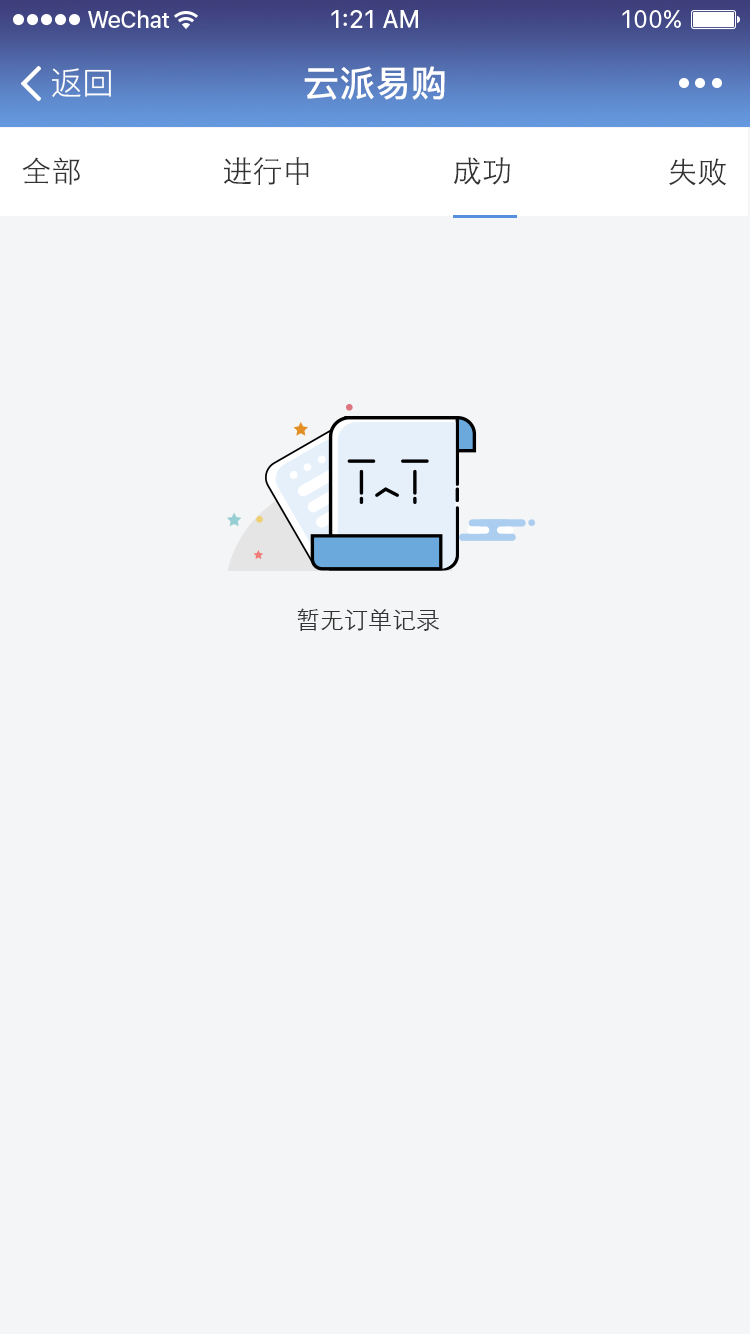
<style>
.page{position:relative;width:750px;height:1334px;background:#f4f5f6}
.page>*{position:absolute;margin:0}
.t1{font:32px "PingFang-SC-Regular";color:#ffffff}
.t2{font:36px "PingFang-SC-Bold";color:#ffffff}
.t3{font:30px "STXihei";color:#333333}
.t4{font:24px "STXihei";color:#333333}
</style>
<div class="page">
<p class="t1" style="left:52px;top:68px;width:59px;height:29px">返回</p>
<p class="t2" style="left:304px;top:66px;width:141px;height:34px">云派易购</p>
<p class="t3" style="left:22px;top:157px;width:58px;height:28px">全部</p>
<p class="t3" style="left:224px;top:157px;width:85px;height:28px">进行中</p>
<p class="t3" style="left:453px;top:157px;width:57px;height:28px">成功</p>
<p class="t3" style="left:669px;top:158px;width:58px;height:28px">失败</p>
<p class="t4" style="left:297px;top:608px;width:143px;height:23px">暂无订单记录</p>
</div>
